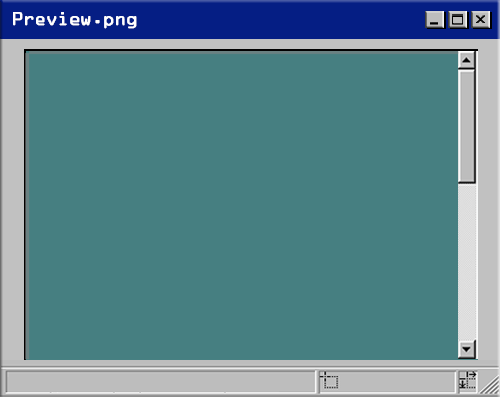
<style>
.page{position:relative;width:500px;height:397px;background:#467f81}
.page>*{position:absolute;margin:0}
.t1{font:16px "OCRAStd";letter-spacing:-0.1em;color:#ffffff;font-weight:bold;scale:1.1 1}
</style>
<div class="page">
<p class="t1" style="left:13px;top:12px;width:124px;height:17px">Preview.png</p>
</div>
